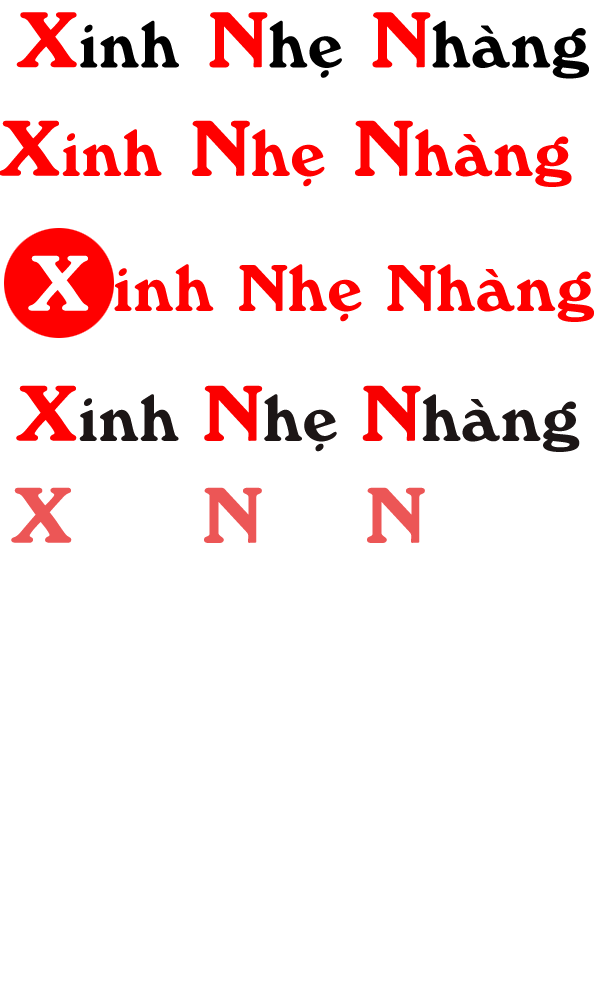
<style>
.page{position:relative;width:600px;height:1000px;background:#ffffff}
.page>*{position:absolute;margin:0}
.t1{font:60px "Windsor-Bold";color:#ff0000}
.t2{font:72px "Windsor-Bold";color:#ff0000}
.t3{font:72px "Windsor-Bold";color:#ffffff}
.t4{font:60px "Windsor-Bold";color:#1c1616}
.t5{font:72px "Windsor-Bold";color:#fb0000}
.t6{font:72px "Windsor-Bold";color:#f80000}
.t7{font:60px "Windsor-Bold";color:#ffffff}
.t8{font:72px "Windsor-Bold";color:#ec5656}
</style>
<div class="page">
<p class="t1" style="left:0px;top:120px;width:572px;height:67px"><span class="t2">X</span>inh<span class="t2"> N</span>hẹ<span class="t2"> N</span>hàng</p>
<p class="t3" style="left:28px;top:255px;width:61px;height:56px">X</p>
<p class="t1" style="left:114px;top:264px;width:480px;height:58px">inh Nhẹ Nhàng</p>
<p class="t4" style="left:16px;top:385px;width:564px;height:67px"><span class="t2">X</span>inh <span class="t5">N</span>hẹ <span class="t6">N</span>hàng</p>
<p class="t7" style="left:11px;top:487px;width:573px;height:67px"><span class="t8">X</span>inh <span class="t8">N</span>hẹ <span class="t8">N</span>hàng</p>
</div>
